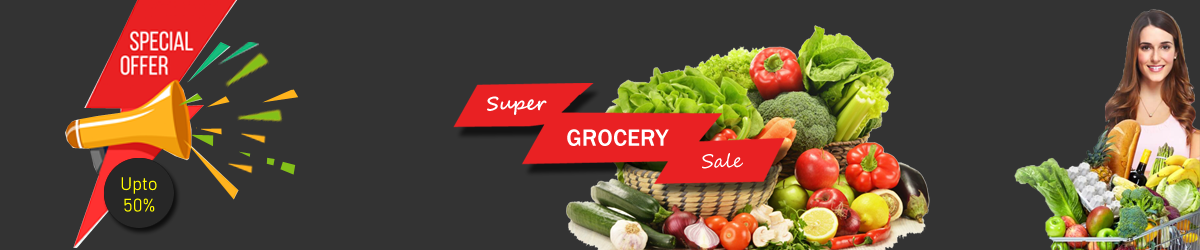
<style>
.page{position:relative;width:1200px;height:250px;background:#333333}
.page>*{position:absolute;margin:0}
.t1{font:19.5px "SegoeScript-Bold";color:#ffffff}
.t2{font:24.3px "FranklinGothic-Medium";color:#ffffff}
.t3{font:19.5px "SegoeScript";color:#ffffff}
.t4{font:18px "Bahnschrift";color:#fffc00}
</style>
<div class="page">
<p class="t1" style="left:487px;top:96px;width:60px;height:19px">Super</p>
<p class="t2" style="left:567px;top:129px;width:102px;height:17px">GROCERY</p>
<p class="t3" style="left:702px;top:153px;width:41px;height:16px">Sale</p>
<p class="t4" style="left:121px;top:177px;width:36px;height:35px;text-align:center">Upto<br>50%</p>
</div>
